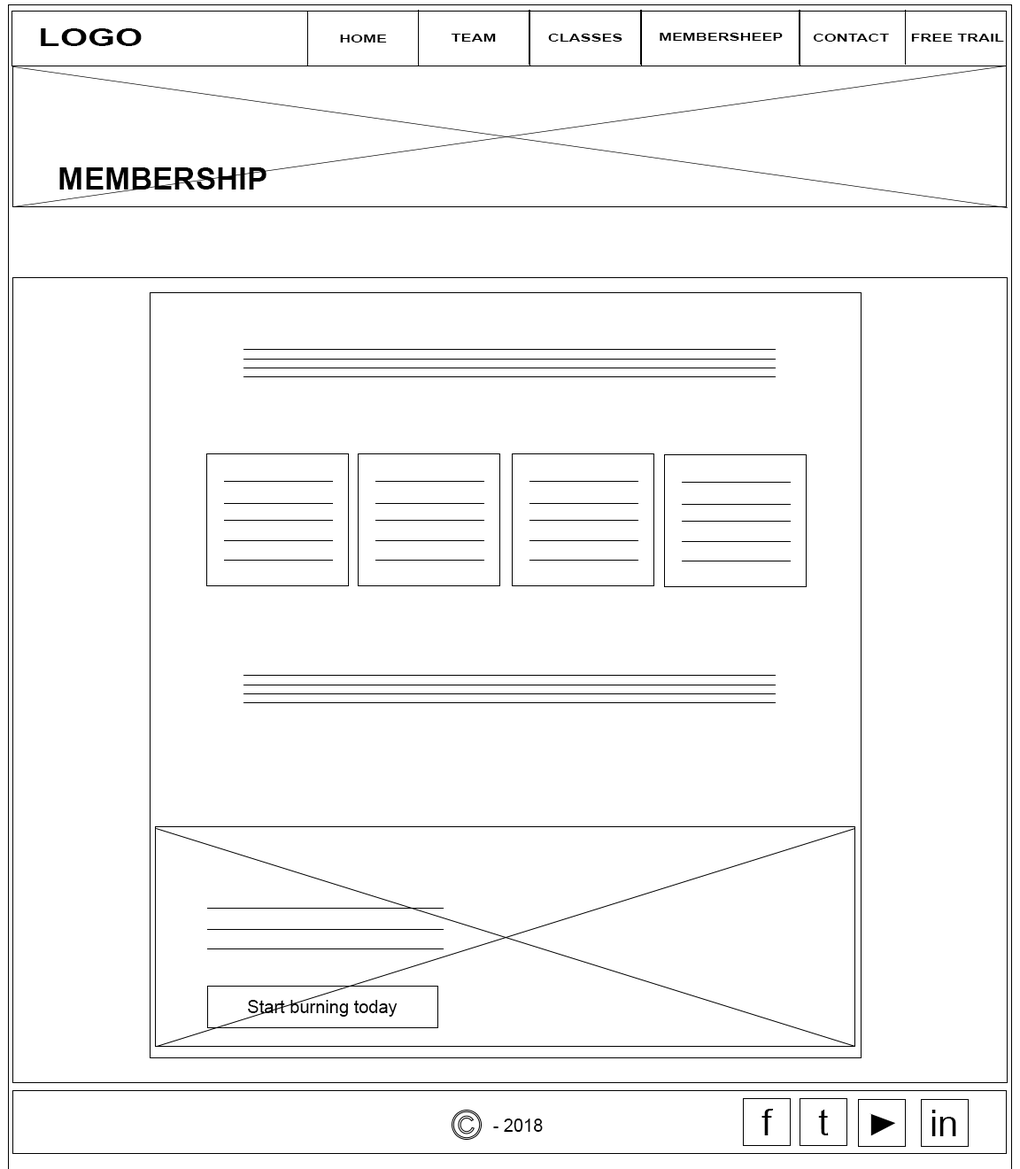
<style>
.page{position:relative;width:1020px;height:1169px;background:#ffffff}
.page>*{position:absolute;margin:0}
.t1{font:23.7px "Arial-BoldMT";color:#000000;scale:1.49 1}
.t2{font:10.6px "Arial-BoldMT";color:#000000;scale:1.49 1}
.t3{font:30.8px "Arial-BoldMT";color:#000000}
.t4{font:17.7px "ArialMT";color:#000000}
.t5{font:36.7px "ArialMT";color:#000000}
</style>
<div class="page">
<p class="t1" style="left:41px;top:28px;width:101px;height:18px">LOGO</p>
<p class="t2" style="left:340px;top:35px;width:47px;height:8px">HOME</p>
<p class="t2" style="left:451px;top:34px;width:45px;height:8px">TEAM</p>
<p class="t2" style="left:548px;top:34px;width:75px;height:8px">CLASSES</p>
<p class="t2" style="left:660px;top:33px;width:123px;height:8px">MEMBERSHEEP</p>
<p class="t2" style="left:813px;top:34px;width:76px;height:8px">CONTACT</p>
<p class="t2" style="left:911px;top:34px;width:93px;height:8px">FREE TRAIL</p>
<p class="t3" style="left:59px;top:167px;width:208px;height:23px">MEMBERSHIP</p>
<p class="t4" style="left:248px;top:1000px;width:150px;height:17px">Start burning today</p>
<p class="t5" style="left:762px;top:1109px;width:12px;height:26px">f</p>
<p class="t5" style="left:818px;top:1109px;width:11px;height:26px">t</p>
<p class="t5" style="left:932px;top:1110px;width:24px;height:26px">in</p>
<p class="t4" style="left:493px;top:1118px;width:50px;height:14px">- 2018</p>
</div>
